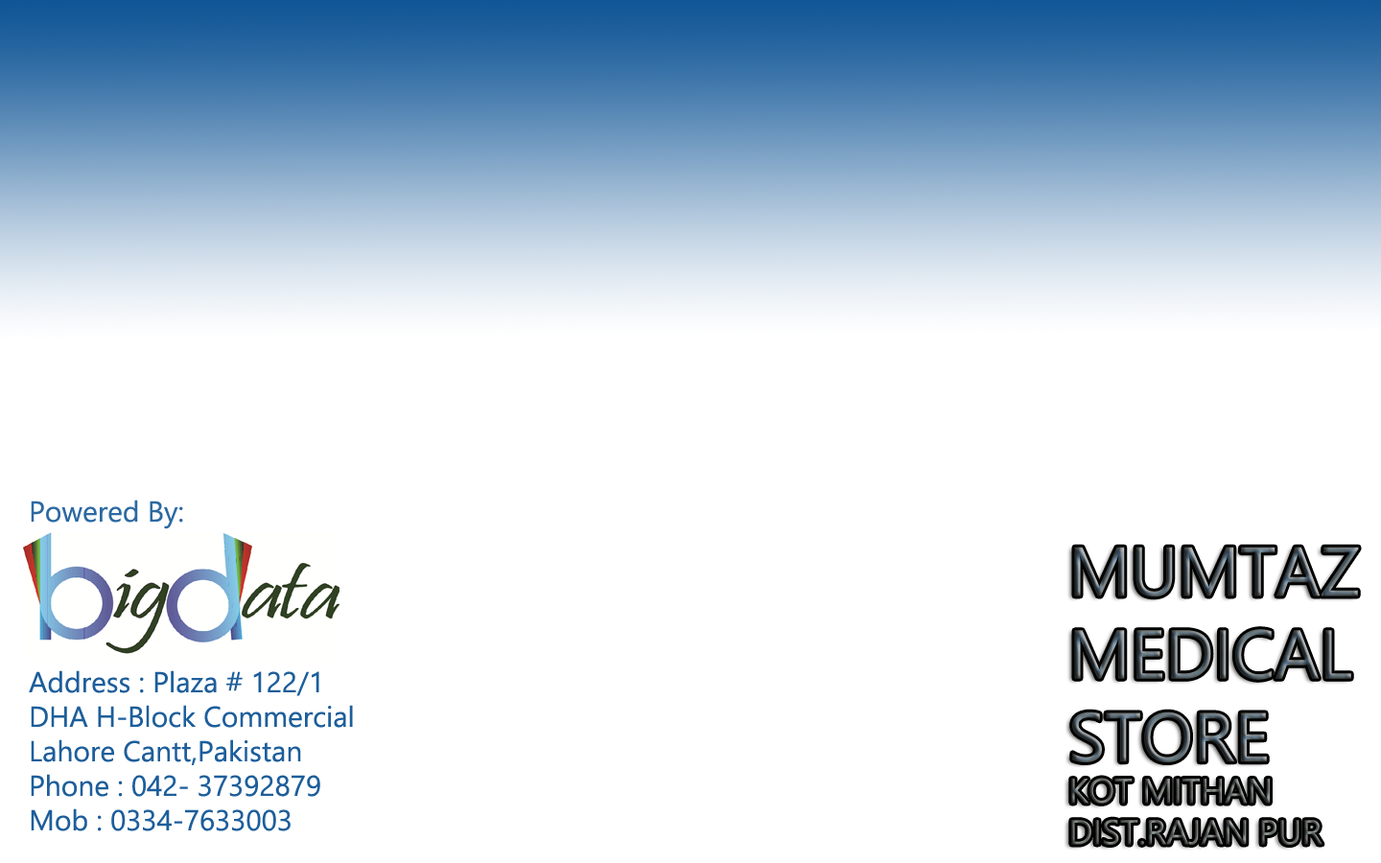
<style>
.page{position:relative;width:1381px;height:863px;background:#ffffff}
.page>*{position:absolute;margin:0}
.t1{font:28.8px "LeelawadeeUI";color:#2c69a2}
.t2{font:34.5px "LeelawadeeUI"}
.t3{font:69.1px "LeelawadeeUI"}
.t4{font:28.8px "LeelawadeeUI";color:#1d5e9b}
</style>
<div class="page">
<p class="t1" style="left:31px;top:500px;width:152px;height:29px">Powered By:</p>
<p class="t2" style="left:1071px;top:547px;width:288px;height:298px"><span class="t3">MUMTAZ<br>MEDICAL <br>STORE<br></span>KOT MITHAN<br>DIST.RAJAN PUR</p>
<p class="t4" style="left:29px;top:670px;width:324px;height:162px">Address : Plaza # 122/1<br>DHA H-Block Commercial<br>Lahore Cantt,Pakistan<br>Phone : 042- 37392879<br>Mob : 0334-7633003</p>
</div>
